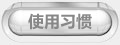
<style>
.page{position:relative;width:120px;height:45px}
.page>*{position:absolute;margin:0}
.t1{font:16px "MicrosoftYaHei";color:#878787}
</style>
<div class="page">
<p class="t1" style="left:28px;top:13px;width:64px;height:17px">使用习惯</p>
</div>
